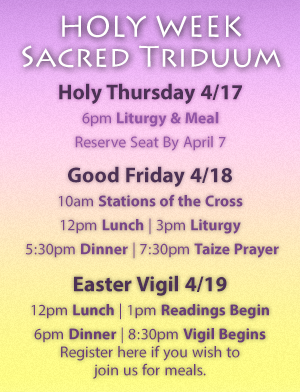
<style>
.page{position:relative;width:300px;height:392px}
.page>*{position:absolute;margin:0}
.t1{font:30px/30px "LithosPro-Regular";color:#ffffff}
.t2{font:22px/24px "MyriadArabic-Regular";color:#9356a7}
.t3{font:30px/30px "MyriadArabic-Bold";color:#4c3155}
.t4{font:22px/24px "MyriadArabic-Bold";color:#9356a7}
.t5{font:22px/24px "MyriadArabic-Bold";color:#794689}
.t6{font:22px/24px "MyriadArabic-Regular";color:#794689}
.t7{font:22px/18px "MyriadArabic-Regular";color:#6b3e79}
.t8{font:30px/24px "MyriadArabic-Bold";color:#4c3155}
.t9{font:22px/24px "MyriadArabic-Regular";color:#6b3e79}
.t10{font:22px/24px "MyriadArabic-Bold";color:#6b3e79}
</style>
<div class="page">
<p class="t1" style="left:22px;top:15px;width:259px;height:53px;text-align:center">HOLY WEEK<br>Sacred Triduum</p>
<p class="t2" style="left:59px;top:83px;width:183px;height:68px;text-align:center"><span class="t3">Holy Thursday 4/17<br></span>6pm<span class="t4"> Liturgy &amp; Meal<br></span>Reserve Seat By April 7</p>
<p class="t5" style="left:25px;top:166px;width:254px;height:93px;text-align:center"><span class="t3">Good Friday 4/18<br></span><span class="t6">10am </span>Stations of the Cross<br><span class="t6">12pm </span>Lunch <span class="t6">| 3pm </span>Liturgy<br><span class="t6"> 5:30pm </span>Dinner <span class="t6">| 7:30pm </span>Taize Prayer</p>
<p class="t7" style="left:31px;top:275px;width:238px;height:104px;text-align:center"><span class="t8">Easter Vigil 4/19<br></span><span class="t9">12pm </span><span class="t10">Lunch </span><span class="t9">| 1pm </span><span class="t10">Readings Begin<br></span><span class="t9">6pm </span><span class="t10">Dinner </span><span class="t9">| 8:30pm </span><span class="t10">Vigil Begins<br></span>Register here if you wish to <br>join us for meals.</p>
</div>
